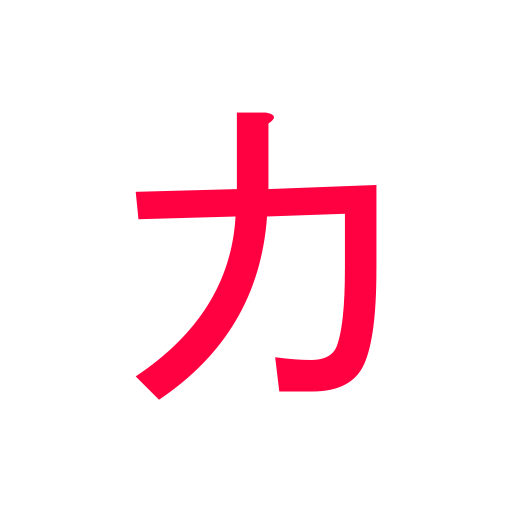
<style>
.page{position:relative;width:512px;height:512px;background:#ffffff}
.page>*{position:absolute;margin:0}
.t1{font:350px "MS-Gothic";color:#ff0040}
</style>
<div class="page">
<p class="t1" style="left:135px;top:112px;width:242px;height:288px">カ</p>
</div>
